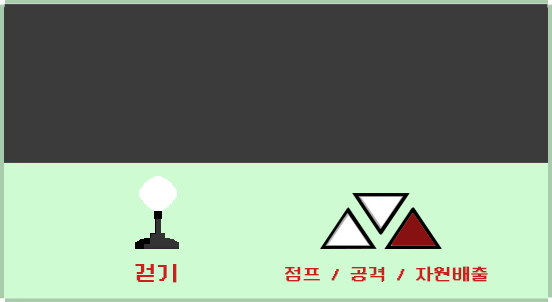
<style>
.page{position:relative;width:552px;height:302px;background:#3b3b3b}
.page>*{position:absolute;margin:0}
.t1{font:22px "DungGeunMo";color:#cd1f1f;font-weight:bold}
.t2{font:18px "DungGeunMo";color:#cd1f1f;font-weight:bold}
</style>
<div class="page">
<p class="t1" style="left:135px;top:264px;width:42px;height:19px">걷기</p>
<p class="t2" style="left:285px;top:266px;width:203px;height:16px">점프 / 공격 / 자원배출</p>
</div>
